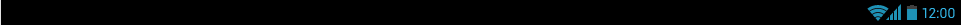
<style>
.page{position:relative;width:961px;height:25px;background:#000000}
.page>*{position:absolute;margin:0}
.t1{font:14px "Roboto-Regular";color:#33b5e5}
</style>
<div class="page">
<p class="t1" style="left:922px;top:8px;width:33px;height:10px">12:00</p>
</div>
